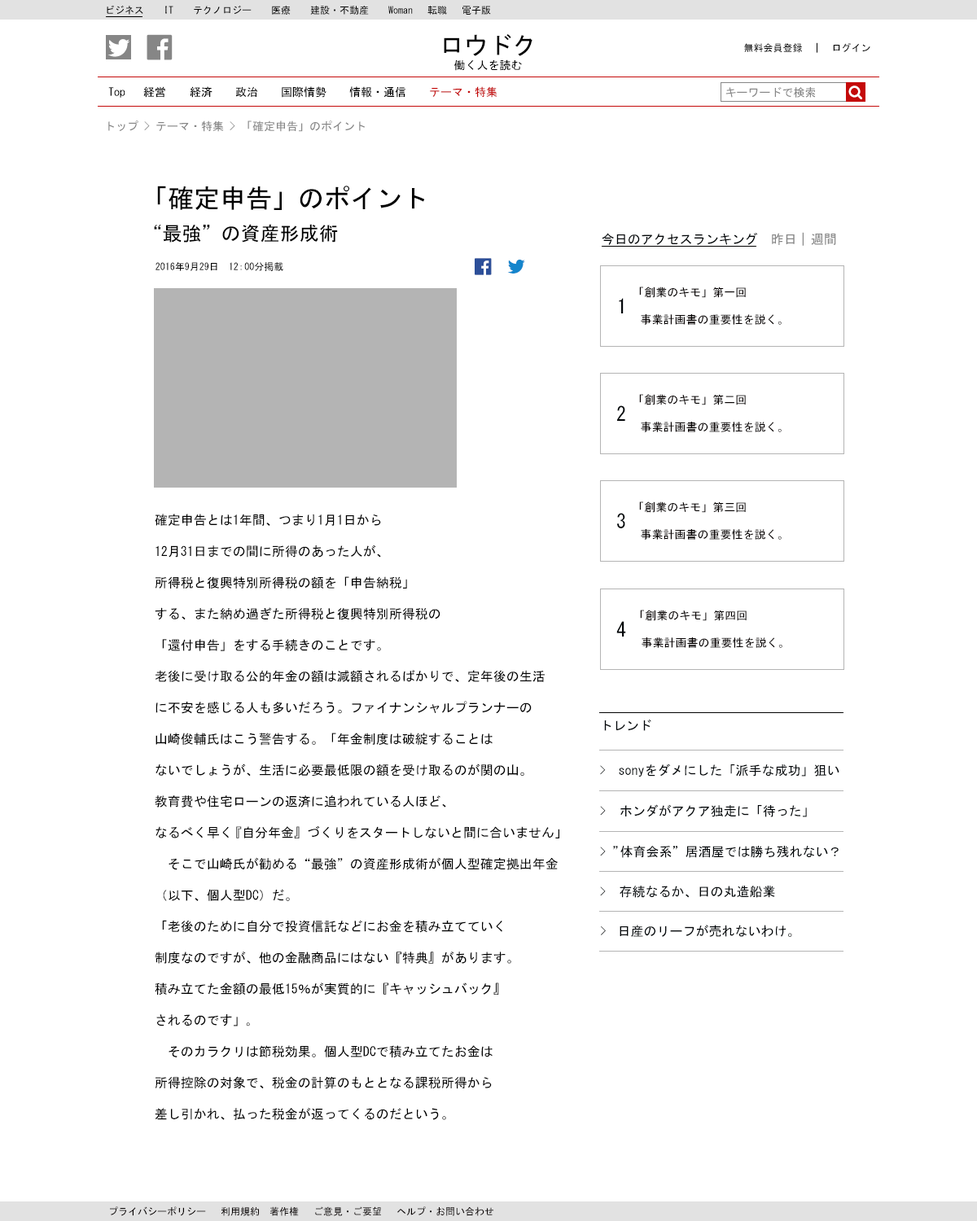
<style>
.page{position:relative;width:977px;height:1221px;background:#ffffff}
.page>*{position:absolute;margin:0}
.t1{font:9.8px "MS-Gothic";color:#000000}
.t2{font:24.4px "MS-Gothic";color:#000000}
.t3{font:11.4px "MS-Gothic";color:#000000}
.t4{font:11.4px "MS-Gothic";color:#c40909}
.t5{font:11.4px "MS-Gothic";color:#868686}
.t6{font:26px "MS-Gothic";color:#000000}
.t7{font:19.5px "MS-Gothic";color:#000000}
.t8{font:13px "MS-Gothic";color:#010508}
.t9{font:13px "MS-Gothic";color:#868686}
.t10{font:11.4px "MS-Gothic";color:#060101}
.t11{font:19.5px "MS-Gothic";color:#010508}
.t12{font:13px "MS-Gothic";color:#000000}
.t13{font:11.4px "MS-Gothic";color:#010508}
.t14{font:9.8px "MS-Gothic";color:#060101}
</style>
<div class="page">
<p class="t1" style="left:107px;top:5px;width:384px;height:10px">ビジネス IT テクノロジー　　医療　　建設・不動産　　Woman   転職   電子版</p>
<p class="t2" style="left:444px;top:34px;width:88px;height:22px">ロウドク</p>
<p class="t1" style="left:744px;top:42px;width:126px;height:11px">無料会員登録　｜　ログイン</p>
<p class="t3" style="left:454px;top:59px;width:68px;height:12px">働く人を読む</p>
<p class="t3" style="left:108px;top:86px;width:389px;height:12px">Top  経営 　　経済  　政治　　国際情勢　　情報・通信　　<span class="t4">テーマ・特集</span></p>
<p class="t5" style="left:725px;top:87px;width:91px;height:11px">キーワードで検索</p>
<p class="t5" style="left:108px;top:120px;width:257px;height:12px">トップ &gt; テーマ・特集 &gt; 「確定申告」のポイント</p>
<p class="t6" style="left:157px;top:186px;width:268px;height:24px">「確定申告」のポイント</p>
<p class="t7" style="left:154px;top:224px;width:184px;height:19px">“最強”の資産形成術</p>
<p class="t8" style="left:601px;top:232px;width:235px;height:14px">今日のアクセスランキング　<span class="t9">昨日 | 週間</span></p>
<p class="t1" style="left:155px;top:262px;width:128px;height:9px">2016年9月29日　12：00分掲載</p>
<p class="t10" style="left:639px;top:286px;width:142px;height:39px">「創業のキモ」第一回<br><br>事業計画書の重要性を説く。</p>
<p class="t11" style="left:619px;top:298px;width:4px;height:15px">1</p>
<p class="t10" style="left:639px;top:394px;width:142px;height:38px">「創業のキモ」第二回<br><br>事業計画書の重要性を説く。</p>
<p class="t11" style="left:617px;top:405px;width:8px;height:16px">2</p>
<p class="t10" style="left:639px;top:501px;width:142px;height:39px">「創業のキモ」第三回<br><br>事業計画書の重要性を説く。</p>
<p class="t12" style="left:155px;top:514px;width:404px;height:606px">確定申告とは1年間、つまり1月1日から<br><br>12月31日までの間に所得のあった人が、<br><br>所得税と復興特別所得税の額を「申告納税」<br><br>する、また納め過ぎた所得税と復興特別所得税の<br><br>「還付申告」をする手続きのことです。<br><br>老後に受け取る公的年金の額は減額されるばかりで、定年後の生活<br><br>に不安を感じる人も多いだろう。ファイナンシャルプランナーの<br><br>山崎俊輔氏はこう警告する。「年金制度は破綻することは<br><br>ないでしょうが、生活に必要最低限の額を受け取るのが関の山。<br><br>教育費や住宅ローンの返済に追われている人ほど、<br><br>なるべく早く『自分年金』づくりをスタートしないと間に合いません」<br><br>　そこで山崎氏が勧める“最強”の資産形成術が個人型確定拠出年金<br><br>（以下、個人型DC）だ。<br><br>「老後のために自分で投資信託などにお金を積み立てていく<br><br>制度なのですが、他の金融商品にはない『特典』があります。<br><br>積み立てた金額の最低15％が実質的に『キャッシュバック』<br><br>されるのです」｡<br><br>　そのカラクリは節税効果。個人型DCで積み立てたお金は<br><br>所得控除の対象で、税金の計算のもととなる課税所得から<br><br>差し引かれ、払った税金が返ってくるのだという。</p>
<p class="t11" style="left:617px;top:513px;width:8px;height:15px">3</p>
<p class="t10" style="left:640px;top:610px;width:142px;height:38px">「創業のキモ」第四回<br><br>事業計画書の重要性を説く。</p>
<p class="t11" style="left:616px;top:621px;width:10px;height:15px">4</p>
<p class="t8" style="left:604px;top:720px;width:47px;height:11px">トレンド</p>
<p class="t8" style="left:600px;top:763px;width:239px;height:13px"><span class="t13">&gt; </span>sonyをダメにした「派手な成功」狙い</p>
<p class="t8" style="left:600px;top:804px;width:207px;height:13px"><span class="t13">&gt; 　</span>ホンダがアクア独走に「待った」</p>
<p class="t8" style="left:600px;top:846px;width:238px;height:12px"><span class="t13">&gt;</span> ”体育会系”居酒屋では勝ち残れない？</p>
<p class="t8" style="left:600px;top:886px;width:175px;height:12px"><span class="t13">&gt; 　</span>存続なるか、日の丸造船業</p>
<p class="t8" style="left:601px;top:925px;width:191px;height:12px"><span class="t13">&gt;　</span>日産のリーフが売れないわけ。</p>
<p class="t14" style="left:110px;top:1206px;width:384px;height:10px">プライバシーポリシー   利用規約  著作権   ご意見・ご要望   ヘルプ・お問い合わせ</p>
</div>
